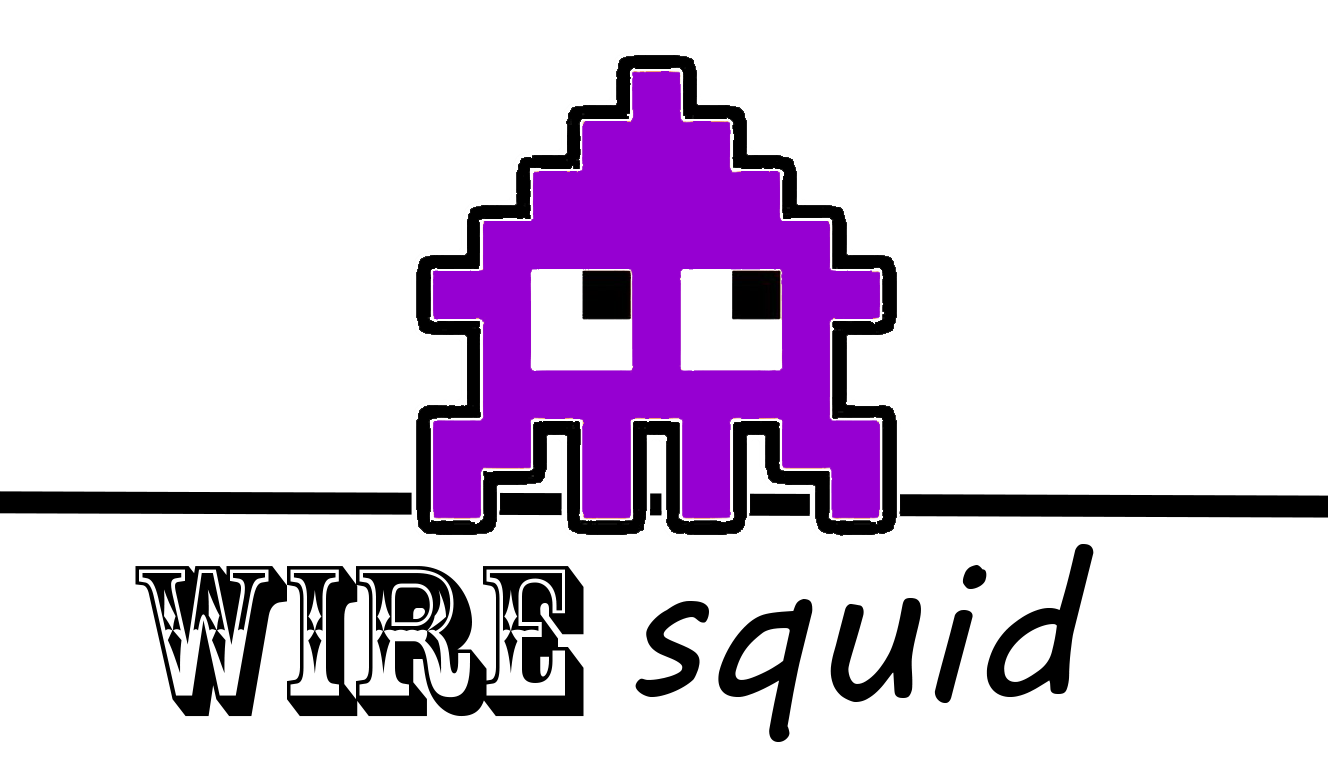
<style>
.page{position:relative;width:1328px;height:762px;background:#ffffff}
.page>*{position:absolute;margin:0}
.t1{font:200px "MVBoli";color:#000000}
.t2{font:200px "RosewoodStd-Regular";color:#000000}
</style>
<div class="page">
<p class="t1" style="left:635px;top:544px;width:459px;height:198px">squid</p>
<p class="t2" style="left:135px;top:566px;width:449px;height:151px">Wire</p>
</div>
